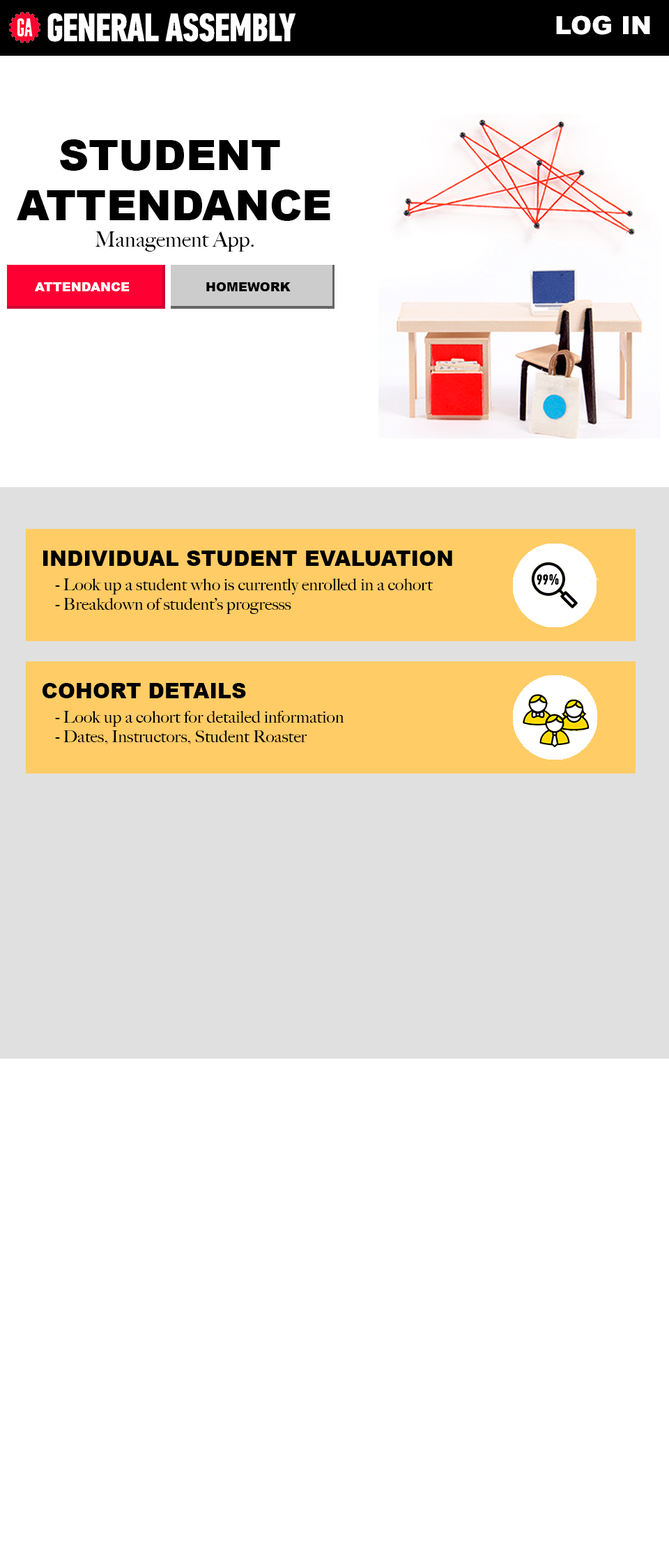
<style>
.page{position:relative;width:669px;height:1568px;background:#ffffff}
.page>*{position:absolute;margin:0}
.t1{font:25.1px "Arial-Black";color:#ffffff}
.t2{font:41.8px "Arial-Black";color:#000000}
.t3{font:20.9px "BigCaslon-Medium";color:#000000}
.t4{font:12.5px "Arial-Black";color:#ffffff}
.t5{font:12.5px "Arial-Black";color:#000000}
.t6{font:20.9px "Arial-Black";color:#000000}
.t7{font:16.7px "BigCaslon-Medium";color:#000000}
</style>
<div class="page">
<p class="t1" style="left:556px;top:15px;width:94px;height:20px">LOG IN</p>
<p class="t2" style="left:17px;top:139px;width:313px;height:82px">STUDENT <br>ATTENDANCE</p>
<p class="t3" style="left:95px;top:231px;width:159px;height:21px">Management App.</p>
<p class="t4" style="left:35px;top:282px;width:95px;height:9px">ATTENDANCE</p>
<p class="t5" style="left:206px;top:282px;width:85px;height:9px">HOMEWORK</p>
<p class="t6" style="left:43px;top:551px;width:409px;height:15px">INDIVIDUAL STUDENT EVALUATION</p>
<p class="t7" style="left:55px;top:578px;width:378px;height:36px">- Look up a student who is currently enrolled in a cohort<br>- Breakdown of student’s progresss</p>
<p class="t6" style="left:43px;top:683px;width:203px;height:15px">COHORT DETAILS</p>
<p class="t7" style="left:55px;top:711px;width:289px;height:33px">- Look up a cohort for detailed information<br>- Dates, Instructors, Student Roaster</p>
</div>
